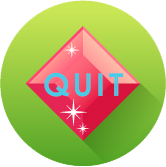
<style>
.page{position:relative;width:166px;height:167px;background:#ffffff}
.page>*{position:absolute;margin:0}
.t1{font:30px "Landmark-Inline";letter-spacing:0.1em;color:#47cce8;font-weight:bold}
</style>
<div class="page">
<p class="t1" style="left:44px;top:72px;width:80px;height:25px">QUIT</p>
</div>
